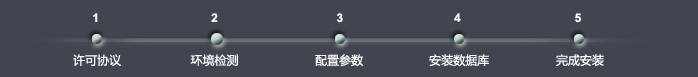
<style>
.page{position:relative;width:698px;height:77px;background:#42454f}
.page>*{position:absolute;margin:0}
.t1{font:12px "Arial-BoldMT";color:#ffffff}
.t2{font:12px "MicrosoftYaHei";color:#ffffff}
</style>
<div class="page">
<p class="t1" style="left:93px;top:13px;width:5px;height:9px">1</p>
<p class="t1" style="left:211px;top:13px;width:7px;height:9px">2</p>
<p class="t1" style="left:337px;top:13px;width:6px;height:10px">3</p>
<p class="t1" style="left:454px;top:13px;width:7px;height:9px">4</p>
<p class="t1" style="left:575px;top:13px;width:6px;height:10px">5</p>
<p class="t2" style="left:73px;top:54px;width:48px;height:12px">许可协议</p>
<p class="t2" style="left:190px;top:54px;width:48px;height:13px">环境检测</p>
<p class="t2" style="left:315px;top:54px;width:49px;height:13px">配置参数</p>
<p class="t2" style="left:429px;top:54px;width:60px;height:13px">安装数据库</p>
<p class="t2" style="left:556px;top:54px;width:48px;height:13px">完成安装</p>
</div>
